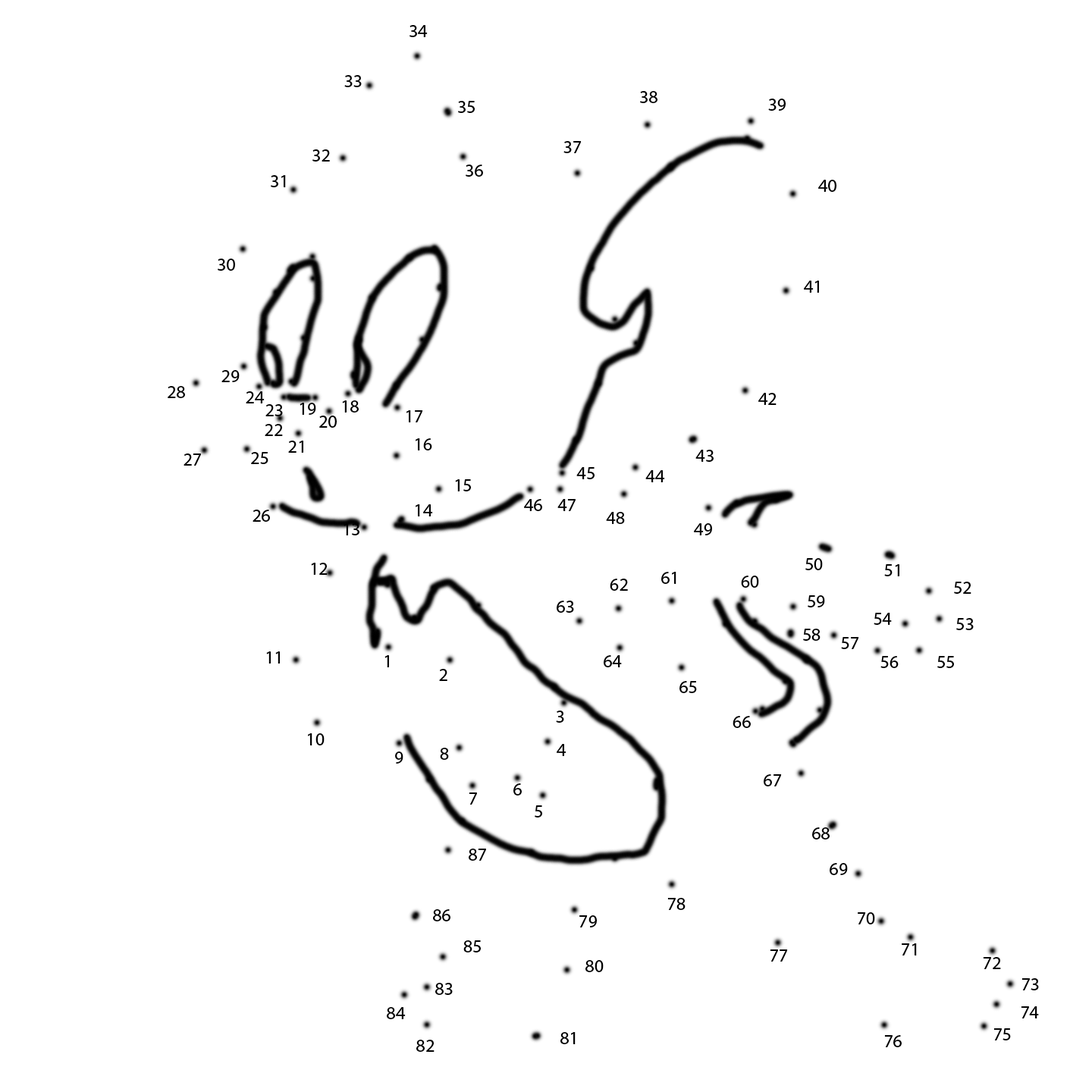
<style>
.page{position:relative;width:1092px;height:1092px;background:#ffffff}
.page>*{position:absolute;margin:0}
.t1{font:18.2px "MyriadPro-Regular";color:#000000}
</style>
<div class="page">
<p class="t1" style="left:409px;top:25px;width:19px;height:12px">34</p>
<p class="t1" style="left:344px;top:75px;width:18px;height:12px">33</p>
<p class="t1" style="left:458px;top:101px;width:17px;height:12px">35</p>
<p class="t1" style="left:640px;top:91px;width:17px;height:12px">38</p>
<p class="t1" style="left:768px;top:99px;width:18px;height:12px">39</p>
<p class="t1" style="left:312px;top:149px;width:18px;height:13px">32</p>
<p class="t1" style="left:563px;top:141px;width:19px;height:12px">37</p>
<p class="t1" style="left:466px;top:165px;width:17px;height:12px">36</p>
<p class="t1" style="left:271px;top:175px;width:15px;height:12px">31</p>
<p class="t1" style="left:818px;top:180px;width:18px;height:12px">40</p>
<p class="t1" style="left:218px;top:259px;width:17px;height:12px">30</p>
<p class="t1" style="left:804px;top:281px;width:15px;height:12px">41</p>
<p class="t1" style="left:221px;top:370px;width:19px;height:12px">29</p>
<p class="t1" style="left:168px;top:386px;width:17px;height:12px">28</p>
<p class="t1" style="left:246px;top:391px;width:19px;height:12px">24</p>
<p class="t1" style="left:342px;top:400px;width:17px;height:13px">18</p>
<p class="t1" style="left:758px;top:393px;width:19px;height:12px">42</p>
<p class="t1" style="left:265px;top:404px;width:18px;height:12px">23</p>
<p class="t1" style="left:300px;top:403px;width:16px;height:12px">19</p>
<p class="t1" style="left:406px;top:410px;width:17px;height:12px">17</p>
<p class="t1" style="left:265px;top:424px;width:18px;height:12px">22</p>
<p class="t1" style="left:319px;top:416px;width:18px;height:12px">20</p>
<p class="t1" style="left:288px;top:441px;width:15px;height:12px">21</p>
<p class="t1" style="left:416px;top:438px;width:16px;height:12px">16</p>
<p class="t1" style="left:695px;top:450px;width:19px;height:12px">43</p>
<p class="t1" style="left:184px;top:453px;width:17px;height:13px">27</p>
<p class="t1" style="left:251px;top:452px;width:17px;height:12px">25</p>
<p class="t1" style="left:576px;top:467px;width:19px;height:12px">45</p>
<p class="t1" style="left:645px;top:470px;width:20px;height:12px">44</p>
<p class="t1" style="left:455px;top:479px;width:16px;height:12px">15</p>
<p class="t1" style="left:253px;top:510px;width:17px;height:12px">26</p>
<p class="t1" style="left:416px;top:504px;width:17px;height:12px">14</p>
<p class="t1" style="left:524px;top:499px;width:18px;height:12px">46</p>
<p class="t1" style="left:557px;top:499px;width:19px;height:12px">47</p>
<p class="t1" style="left:606px;top:512px;width:19px;height:12px">48</p>
<p class="t1" style="left:344px;top:523px;width:15px;height:12px">13</p>
<p class="t1" style="left:694px;top:523px;width:18px;height:12px">49</p>
<p class="t1" style="left:311px;top:563px;width:17px;height:12px">12</p>
<p class="t1" style="left:805px;top:558px;width:18px;height:12px">50</p>
<p class="t1" style="left:884px;top:564px;width:15px;height:12px">51</p>
<p class="t1" style="left:610px;top:579px;width:18px;height:12px">62</p>
<p class="t1" style="left:661px;top:572px;width:15px;height:12px">61</p>
<p class="t1" style="left:741px;top:576px;width:18px;height:12px">60</p>
<p class="t1" style="left:954px;top:582px;width:17px;height:12px">52</p>
<p class="t1" style="left:557px;top:601px;width:17px;height:12px">63</p>
<p class="t1" style="left:808px;top:595px;width:17px;height:12px">59</p>
<p class="t1" style="left:874px;top:613px;width:18px;height:12px">54</p>
<p class="t1" style="left:803px;top:629px;width:18px;height:12px">58</p>
<p class="t1" style="left:956px;top:618px;width:18px;height:12px">53</p>
<p class="t1" style="left:841px;top:637px;width:18px;height:12px">57</p>
<p class="t1" style="left:266px;top:651px;width:14px;height:13px">11</p>
<p class="t1" style="left:384px;top:655px;width:5px;height:12px">1</p>
<p class="t1" style="left:604px;top:655px;width:18px;height:12px">64</p>
<p class="t1" style="left:880px;top:656px;width:19px;height:12px">56</p>
<p class="t1" style="left:937px;top:656px;width:17px;height:12px">55</p>
<p class="t1" style="left:439px;top:669px;width:8px;height:12px">2</p>
<p class="t1" style="left:679px;top:681px;width:18px;height:12px">65</p>
<p class="t1" style="left:556px;top:711px;width:8px;height:12px">3</p>
<p class="t1" style="left:733px;top:716px;width:18px;height:12px">66</p>
<p class="t1" style="left:308px;top:733px;width:17px;height:12px">10</p>
<p class="t1" style="left:440px;top:748px;width:9px;height:12px">8</p>
<p class="t1" style="left:557px;top:744px;width:9px;height:12px">4</p>
<p class="t1" style="left:395px;top:751px;width:8px;height:13px">9</p>
<p class="t1" style="left:513px;top:783px;width:9px;height:12px">6</p>
<p class="t1" style="left:764px;top:774px;width:18px;height:12px">67</p>
<p class="t1" style="left:469px;top:792px;width:8px;height:13px">7</p>
<p class="t1" style="left:535px;top:805px;width:7px;height:12px">5</p>
<p class="t1" style="left:812px;top:827px;width:18px;height:12px">68</p>
<p class="t1" style="left:469px;top:849px;width:17px;height:12px">87</p>
<p class="t1" style="left:830px;top:863px;width:18px;height:12px">69</p>
<p class="t1" style="left:667px;top:898px;width:19px;height:12px">78</p>
<p class="t1" style="left:433px;top:909px;width:17px;height:12px">86</p>
<p class="t1" style="left:579px;top:915px;width:18px;height:12px">79</p>
<p class="t1" style="left:858px;top:912px;width:17px;height:12px">70</p>
<p class="t1" style="left:463px;top:940px;width:18px;height:12px">85</p>
<p class="t1" style="left:770px;top:949px;width:18px;height:13px">77</p>
<p class="t1" style="left:902px;top:943px;width:15px;height:12px">71</p>
<p class="t1" style="left:585px;top:960px;width:19px;height:12px">80</p>
<p class="t1" style="left:983px;top:957px;width:18px;height:12px">72</p>
<p class="t1" style="left:435px;top:983px;width:18px;height:12px">83</p>
<p class="t1" style="left:1021px;top:978px;width:18px;height:12px">73</p>
<p class="t1" style="left:387px;top:1007px;width:19px;height:12px">84</p>
<p class="t1" style="left:1021px;top:1006px;width:18px;height:12px">74</p>
<p class="t1" style="left:560px;top:1032px;width:16px;height:12px">81</p>
<p class="t1" style="left:884px;top:1035px;width:18px;height:12px">76</p>
<p class="t1" style="left:993px;top:1028px;width:18px;height:12px">75</p>
<p class="t1" style="left:416px;top:1040px;width:19px;height:12px">82</p>
</div>
